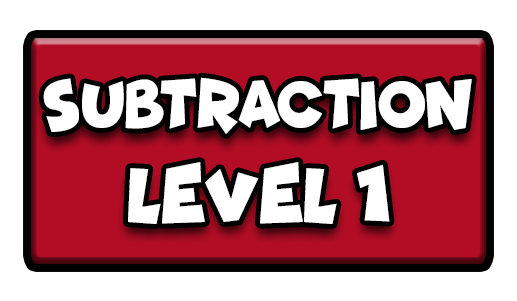
<style>
.page{position:relative;width:517px;height:301px;background:#ffffff}
.page>*{position:absolute;margin:0}
.t1{font:68.8px "Funhouse";color:#ffffff;scale:0.85 1}
.t2{font:77.7px "Funhouse";color:#ffffff;scale:0.95 1}
</style>
<div class="page">
<p class="t1" style="left:43px;top:77px;width:429px;height:57px">SUBTRACTION</p>
<p class="t2" style="left:128px;top:162px;width:262px;height:62px">LEVEL 1</p>
</div>
